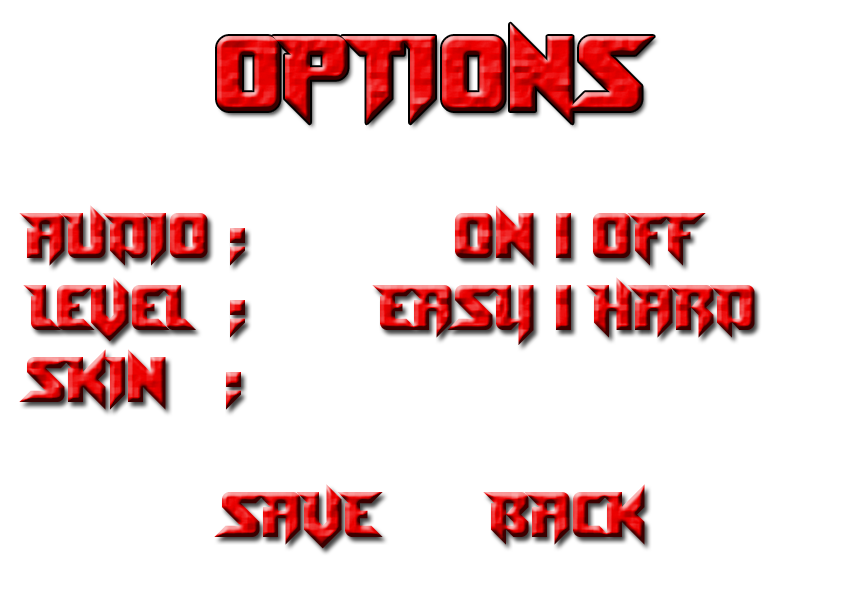
<style>
.page{position:relative;width:842px;height:595px;background:#ffffff}
.page>*{position:absolute;margin:0}
.t1{font:100px "Toe-the-Lineless"}
.t2{font:60px "Toe-the-Lineless"}
</style>
<div class="page">
<p class="t1" style="left:217px;top:23px;width:437px;height:101px">OPTIONS</p>
<p class="t2" style="left:19px;top:205px;width:687px;height:205px">AUDIO :           ON | OFF<br><br>SKIN   :</p>
<p class="t2" style="left:23px;top:277px;width:732px;height:68px">LeveL  :       EASY | HARD</p>
<p class="t2" style="left:214px;top:484px;width:431px;height:65px">SAVE    BACK</p>
</div>
